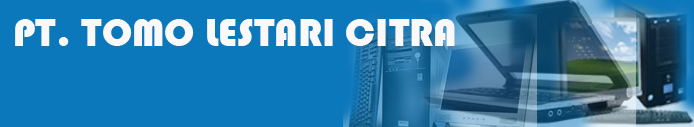
<style>
.page{position:relative;width:694px;height:127px;background:#0c78bc}
.page>*{position:absolute;margin:0}
.t1{font:40px "Bauhaus93";color:#faf8f8}
</style>
<div class="page">
<p class="t1" style="left:15px;top:19px;width:440px;height:27px">PT. TOMO LESTARI CITRA</p>
</div>
